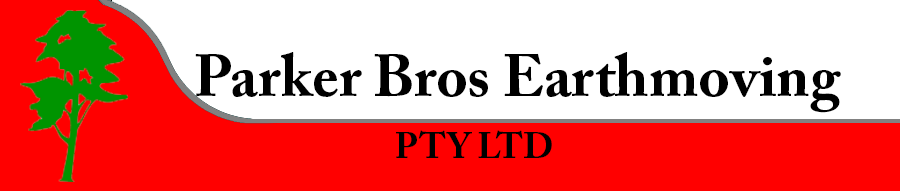
<style>
.page{position:relative;width:900px;height:191px;background:#ffffff}
.page>*{position:absolute;margin:0}
.t1{font:60px "ACaslonPro-Bold";color:#000000}
.t2{font:36px "ACaslonPro-Bold";color:#000000}
</style>
<div class="page">
<p class="t1" style="left:195px;top:52px;width:646px;height:61px">Parker Bros Earthmoving</p>
<p class="t2" style="left:396px;top:130px;width:156px;height:28px">PTY LTD</p>
</div>
